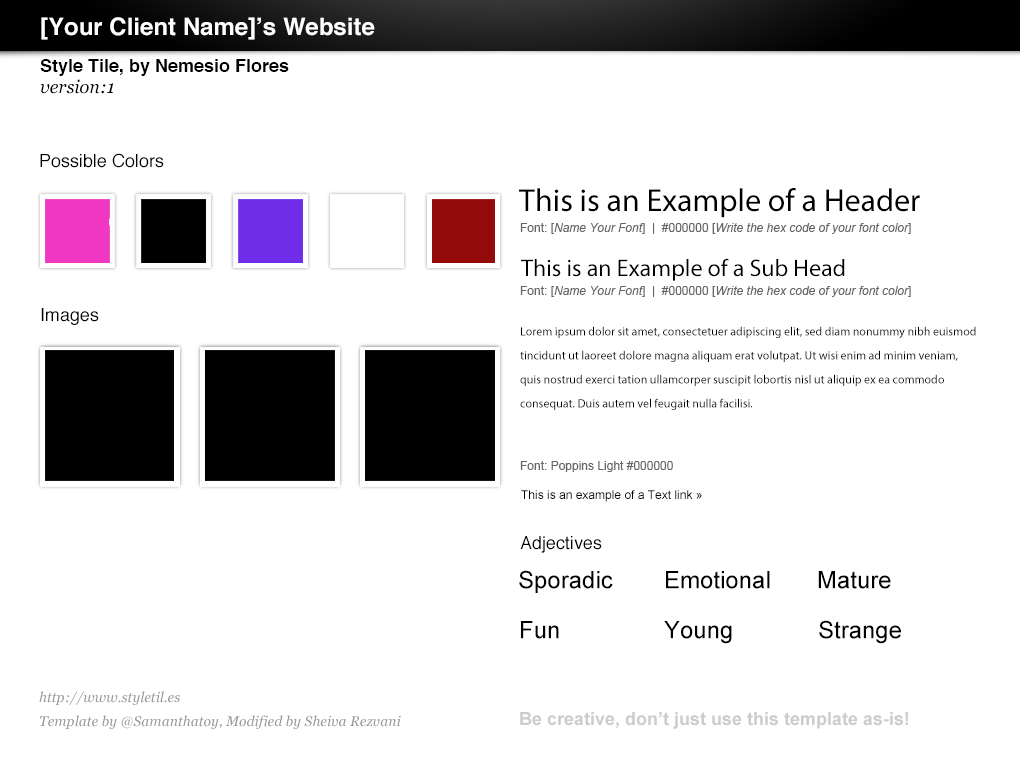
<style>
.page{position:relative;width:1020px;height:760px;background:#ffffff}
.page>*{position:absolute;margin:0}
.t1{font:24px "Helvetica-Bold";color:#ffffff}
.t2{font:18px "Helvetica-Bold";color:#000000}
.t3{font:18px "Georgia-Italic";color:#000000}
.t4{font:18px "Helvetica";color:#000000}
.t5{font:32px "MyriadPro-Regular";color:#000000}
.t6{font:12px "Arial-ItalicMT";color:#666666}
.t7{font:12px "ArialMT";color:#666666}
.t8{font:24px "MyriadPro-Regular";color:#000000}
.t9{font:12px/24px "MyriadPro-Regular";color:#000000}
.t10{font:12px "ArialMT";color:#000000}
.t11{font:24px "ArialMT";color:#000000}
.t12{font:14px/24px "Georgia-Italic";color:#999999}
.t13{font:18px "Arial-BoldMT";color:#cccccc}
</style>
<div class="page">
<p class="t1" style="left:41px;top:17px;width:334px;height:23px">[Your Client Name]’s Website</p>
<p class="t2" style="left:40px;top:59px;width:249px;height:17px">Style Tile, by Nemesio Flores</p>
<p class="t3" style="left:40px;top:79px;width:74px;height:15px">version:1</p>
<p class="t4" style="left:40px;top:153px;width:124px;height:15px">Possible Colors</p>
<p class="t5" style="left:519px;top:188px;width:401px;height:30px">This is an Example of a Header</p>
<p class="t6" style="left:520px;top:223px;width:391px;height:11px"><span class="t7">Font: [</span>Name Your Font<span class="t7">]  |  #000000 [</span>Write the hex code of your font color<span class="t7">]</span></p>
<p class="t8" style="left:521px;top:258px;width:324px;height:23px">This is an Example of a Sub Head</p>
<p class="t6" style="left:520px;top:286px;width:391px;height:11px"><span class="t7">Font: [</span>Name Your Font<span class="t7">]  |  #000000 [</span>Write the hex code of your font color<span class="t7">]</span></p>
<p class="t4" style="left:41px;top:308px;width:58px;height:17px">Images</p>
<p class="t9" style="left:520px;top:326px;width:456px;height:84px">Lorem ipsum dolor sit amet, consectetuer adipiscing elit, sed diam nonummy nibh euismod tincidunt ut laoreet dolore magna aliquam erat volutpat. Ut wisi enim ad minim veniam, quis nostrud exerci tation ullamcorper suscipit lobortis nisl ut aliquip ex ea commodo consequat. Duis autem vel feugait nulla facilisi.</p>
<p class="t7" style="left:520px;top:461px;width:153px;height:11px">Font: Poppins Light #000000</p>
<p class="t10" style="left:521px;top:490px;width:181px;height:12px">This is an example of a Text link »</p>
<p class="t4" style="left:520px;top:536px;width:82px;height:17px">Adjectives</p>
<p class="t11" style="left:519px;top:570px;width:94px;height:23px">Sporadic</p>
<p class="t11" style="left:666px;top:571px;width:104px;height:18px">Emotional</p>
<p class="t11" style="left:818px;top:571px;width:73px;height:18px">Mature</p>
<p class="t11" style="left:521px;top:621px;width:38px;height:18px">Fun</p>
<p class="t11" style="left:664px;top:621px;width:68px;height:23px">Young</p>
<p class="t11" style="left:819px;top:620px;width:82px;height:24px">Strange</p>
<p class="t12" style="left:39px;top:691px;width:362px;height:38px">http://www.styletil.es<br>Template by @Samanthatoy, Modified by Sheiva Rezvani</p>
<p class="t13" style="left:520px;top:712px;width:388px;height:17px">Be creative, don’t just use this template as-is!</p>
</div>
